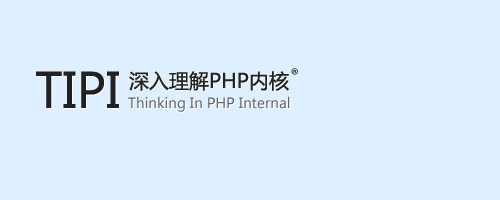
<style>
.page{position:relative;width:500px;height:200px;background:#def0ff}
.page>*{position:absolute;margin:0}
.t1{font:48px "MicrosoftYaHei";color:#212121}
.t2{font:20px "MicrosoftYaHei";color:#222222}
.t3{font:20px "MicrosoftYaHei"}
.t4{font:14px "MicrosoftYaHei";color:#636363}
</style>
<div class="page">
<p class="t1" style="left:36px;top:71px;width:83px;height:37px">TIPI</p>
<p class="t1" style="left:37px;top:72px;width:83px;height:37px">TIPI</p>
<p class="t2" style="left:129px;top:71px;width:160px;height:20px">深入理解PHP内核</p>
<p class="t3" style="left:130px;top:72px;width:160px;height:20px">深入理解PHP内核</p>
<p class="t4" style="left:128px;top:96px;width:162px;height:16px">Thinking In PHP Internal</p>
</div>
